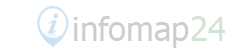
<style>
.page{position:relative;width:250px;height:53px;background:#ffffff}
.page>*{position:absolute;margin:0}
.t1{font:33px "Tahoma";color:#cdcdcd}
</style>
<div class="page">
<p class="t1" style="left:74px;top:16px;width:152px;height:32px">infomap24</p>
</div>
